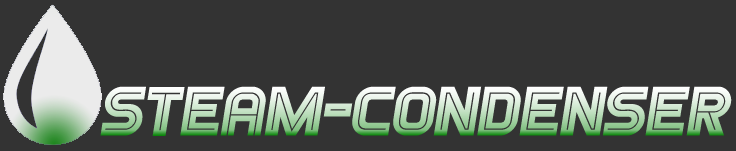
<style>
.page{position:relative;width:736px;height:151px;background:#333333}
.page>*{position:absolute;margin:0}
.t1{font:70px "Games-Italic"}
</style>
<div class="page">
<p class="t1" style="left:100px;top:86px;width:632px;height:50px">steam-condenser</p>
</div>
